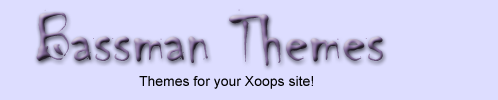
<style>
.page{position:relative;width:498px;height:100px;background:#ddddff}
.page>*{position:absolute;margin:0}
.t1{font:72px "Chiller-Regular"}
.t2{font:14px "ArialMT";color:#030303}
</style>
<div class="page">
<p class="t1" style="left:36px;top:9px;width:347px;height:57px">Bassman Themes</p>
<p class="t2" style="left:139px;top:76px;width:174px;height:13px">Themes for your Xoops site!</p>
</div>
